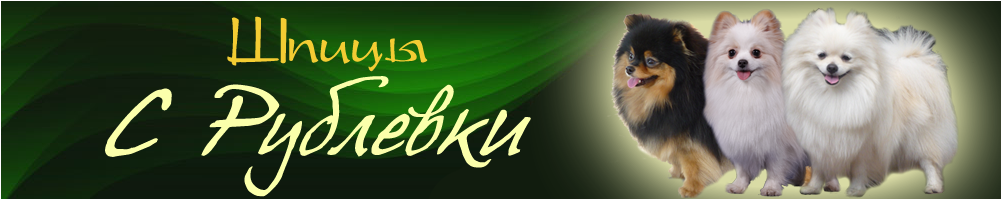
<style>
.page{position:relative;width:1002px;height:200px}
.page>*{position:absolute;margin:0}
.t1{font:72px "PresentScript_cyr";color:#f3cc33}
.t2{font:82px "HansHand-_cyr";color:#fbffab}
</style>
<div class="page">
<p class="t1" style="left:227px;top:16px;width:201px;height:56px">Шпицы</p>
<p class="t2" style="left:105px;top:76px;width:426px;height:121px">С Рублевки</p>
</div>
